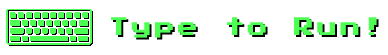
<style>
.page{position:relative;width:388px;height:55px;background:#ffffff}
.page>*{position:absolute;margin:0}
.t1{font:20px "PressStart2P-Regular";letter-spacing:0.16em;color:#4cff52}
.t2{font:20px "PressStart2P-Regular";letter-spacing:0.16em}
</style>
<div class="page">
<p class="t1" style="left:111px;top:17px;width:266px;height:21px">Type to Run!</p>
<p class="t2" style="left:113px;top:19px;width:266px;height:21px">Type to Run!</p>
</div>
